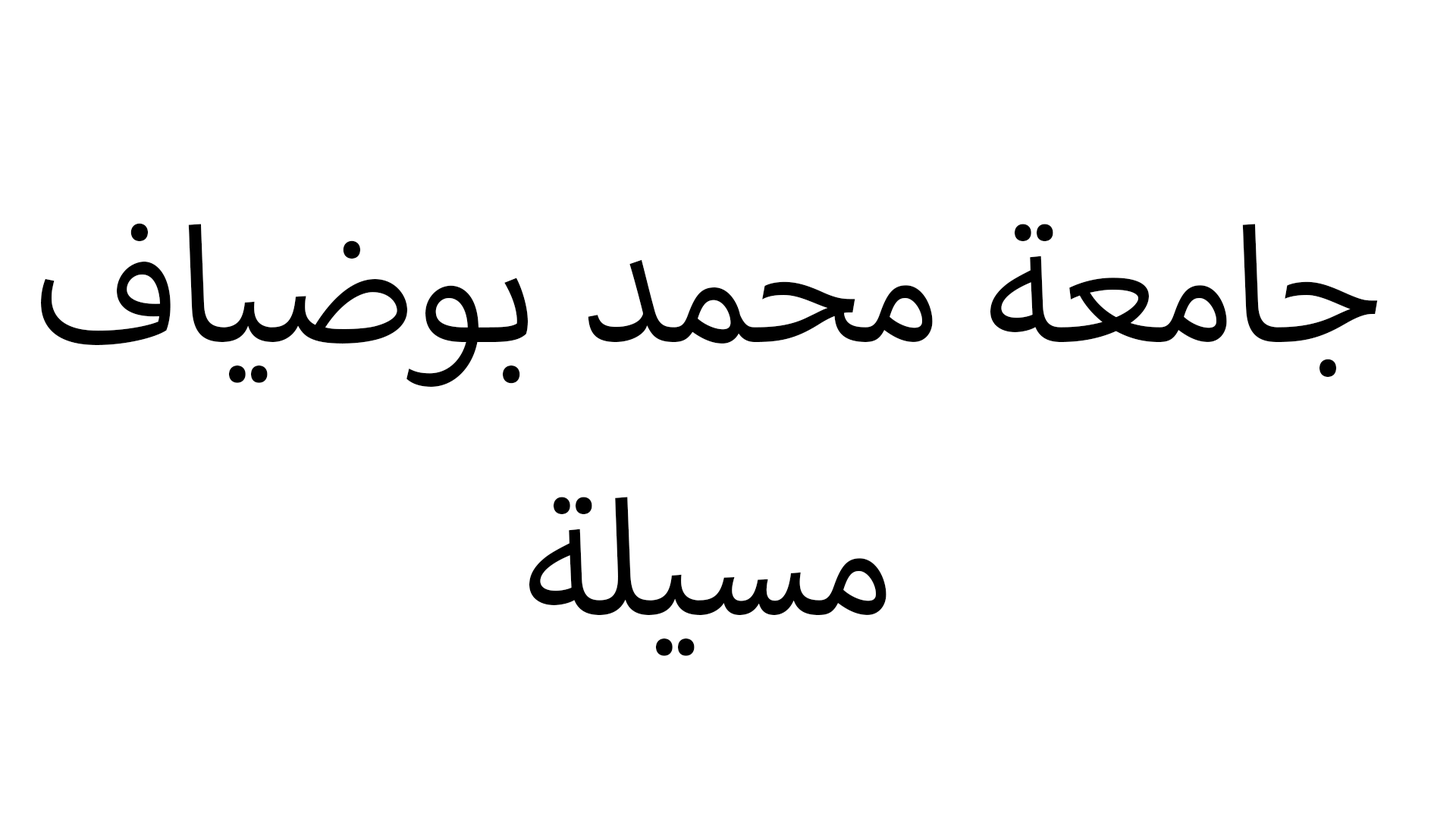
<style>
.page{position:relative;width:1456px;height:819px;background:#ffffff}
.page>*{position:absolute;margin:0}
.t1{font:227.5px "MyriadArabic-Regular";color:#000000}
</style>
<div class="page">
<p class="t1" style="left:41px;top:223px;width:1337px;height:433px;text-align:center">جامعة محمد بوضياف<br>مسيلة</p>
</div>
